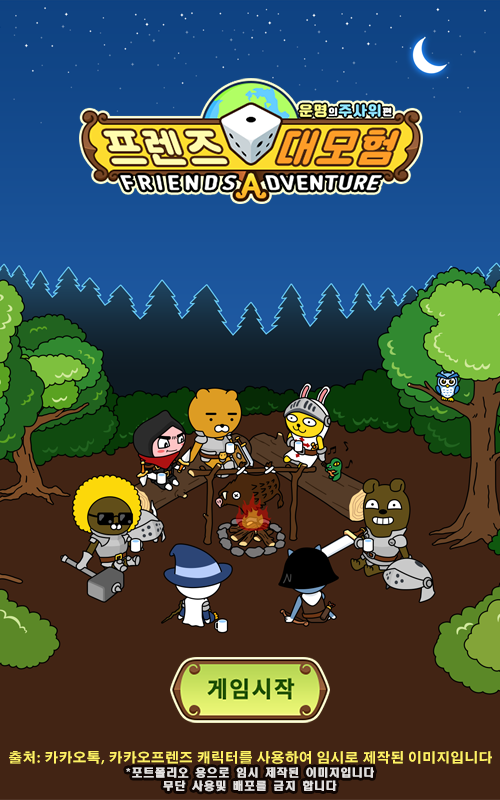
<style>
.page{position:relative;width:500px;height:800px;background:#422414}
.page>*{position:absolute;margin:0}
.t1{font:13.4px "AdobeGothicStd-Bold";letter-spacing:0.05em;color:#fff265}
.t2{font:11px "HeadlineR-HM";letter-spacing:0.05em;color:#e2dfde}
</style>
<div class="page">
<p class="t1" style="left:9px;top:751px;width:483px;height:14px">출처: 카카오톡, 카카오프렌즈 캐릭터를 사용하여 임시로 제작된 이미지입니다</p>
<p class="t2" style="left:126px;top:767px;width:248px;height:25px;text-align:center">*포트폴리오 용으로 임시 제작된 이미지입니다<br>무단 사용및 배포를 금지 합니다</p>
</div>
